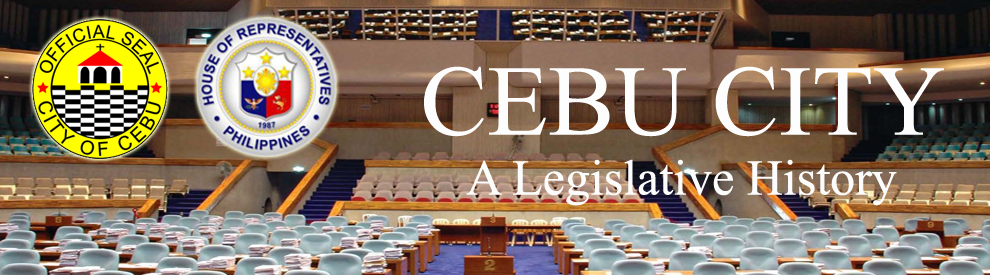
<style>
.page{position:relative;width:990px;height:275px}
.page>*{position:absolute;margin:0}
.t1{font:50px "TimesNewRomanPSMT";color:#fdfcfc}
.t2{font:100px "TimesNewRomanPSMT";color:#fdfdfd}
</style>
<div class="page">
<p class="t1" style="left:424px;top:66px;width:520px;height:140px;text-align:center"><span class="t2">CEBU CITY<br></span>A Legislative History</p>
</div>
